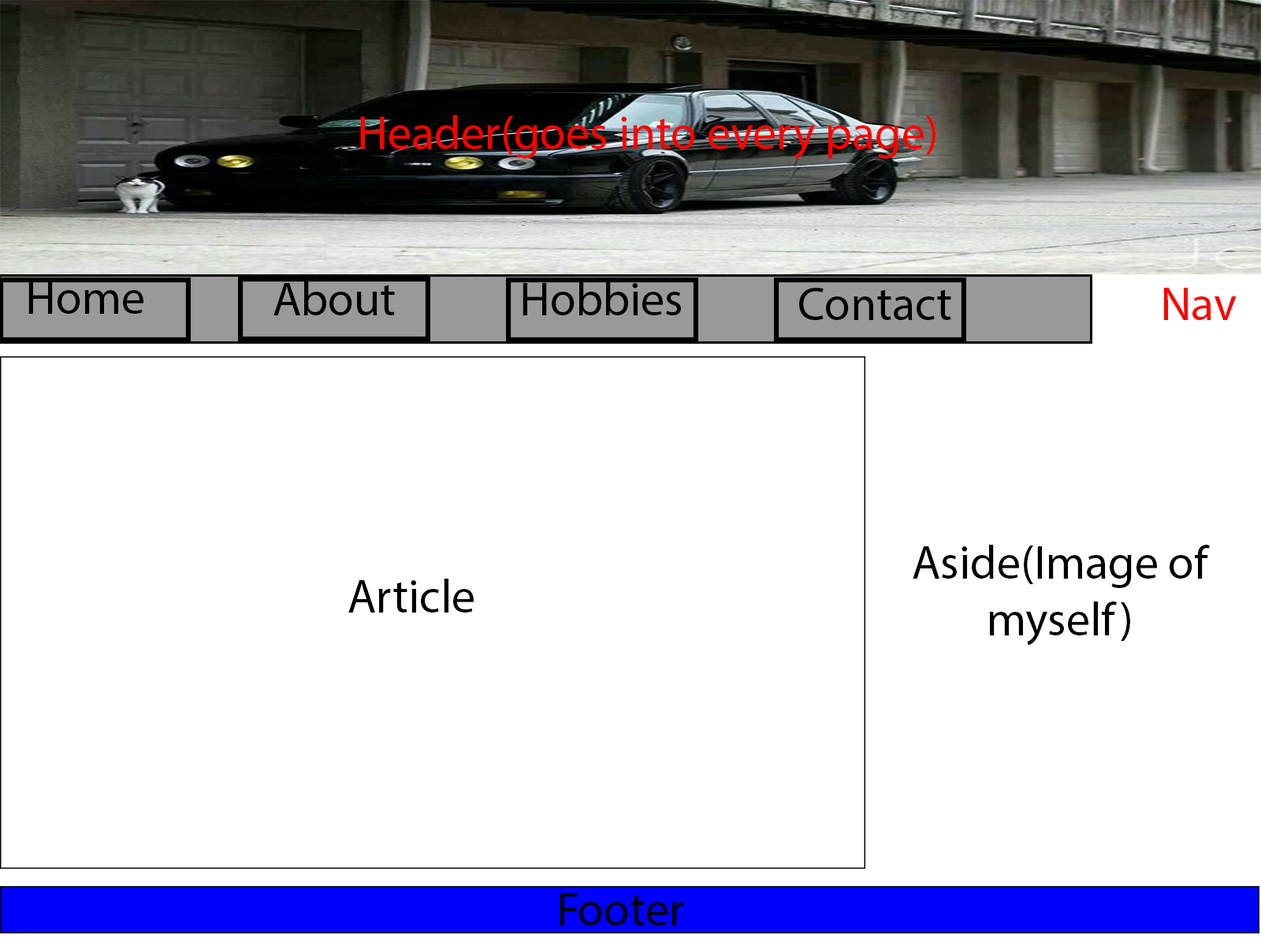
<style>
.page{position:relative;width:1261px;height:946px;background:#ffffff}
.page>*{position:absolute;margin:0}
.t1{font:47.3px "MyriadPro-Regular";color:#fe0000}
.t2{font:47.3px "MyriadPro-Regular";color:#000000}
</style>
<div class="page">
<p class="t1" style="left:360px;top:115px;width:575px;height:44px">Header(goes into every page)</p>
<p class="t2" style="left:28px;top:281px;width:115px;height:33px">Home</p>
<p class="t2" style="left:273px;top:281px;width:122px;height:34px">About</p>
<p class="t2" style="left:522px;top:281px;width:159px;height:34px">Hobbies</p>
<p class="t2" style="left:799px;top:288px;width:152px;height:32px">Contact</p>
<p class="t1" style="left:1164px;top:288px;width:72px;height:32px">Nav</p>
<p class="t2" style="left:913px;top:545px;width:297px;height:100px;text-align:center">Aside(Image of myself)</p>
<p class="t2" style="left:348px;top:578px;width:126px;height:34px">Article</p>
<p class="t2" style="left:560px;top:893px;width:124px;height:32px">Footer</p>
</div>
